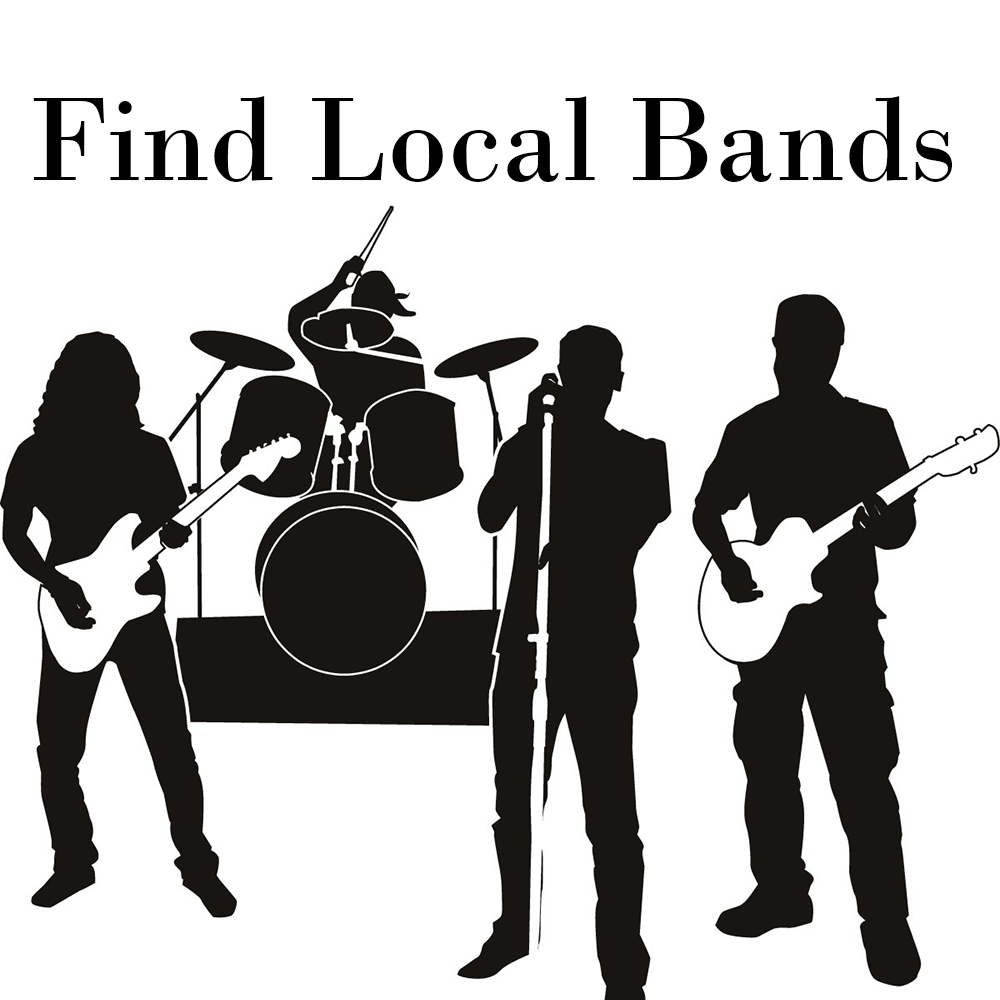
<style>
.page{position:relative;width:1000px;height:1000px;background:#ffffff}
.page>*{position:absolute;margin:0}
.t1{font:125px "BodoniMT";color:#000000}
</style>
<div class="page">
<p class="t1" style="left:33px;top:96px;width:920px;height:86px">Find Local Bands</p>
</div>
